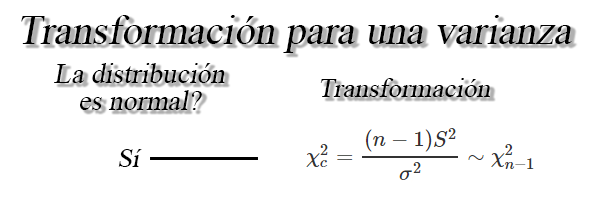
<style>
.page{position:relative;width:592px;height:208px;background:#ffffff}
.page>*{position:absolute;margin:0}
.t1{font:30.5px "TimesNewRomanPSMT";color:#000000;font-style:italic}
.t2{font:21.1px/26.9px "TimesNewRomanPSMT";color:#000000;font-style:italic}
.t3{font:20.4px "TimesNewRomanPSMT";color:#000000;font-style:italic}
.t4{font:26.7px "TimesNewRomanPSMT";color:#000000;font-style:italic}
</style>
<div class="page">
<p class="t1" style="left:21px;top:15px;width:551px;height:38px">Transformación para una varianza</p>
<p class="t2" style="left:54px;top:63px;width:171px;height:47px;text-align:center">La distribución<br>es normal?</p>
<p class="t3" style="left:320px;top:78px;width:170px;height:19px">Transformación</p>
<p class="t4" style="left:118px;top:149px;width:24px;height:18px">Sí</p>
</div>
